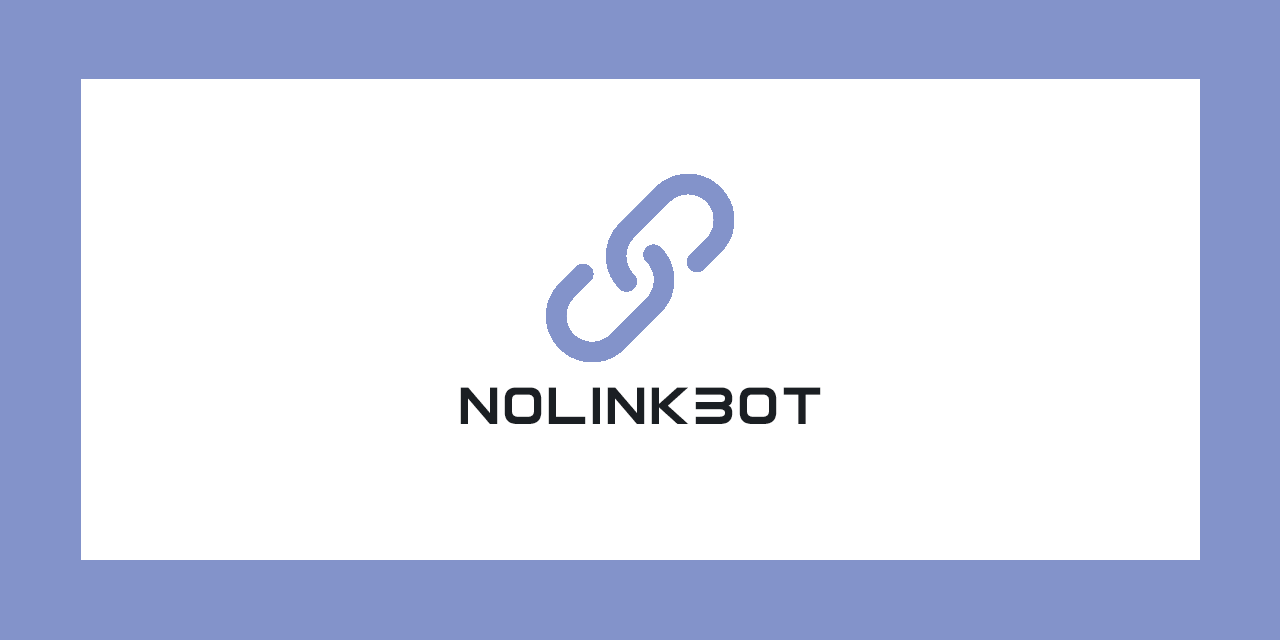
<style>
.page{position:relative;width:1280px;height:640px;background:#ffffff}
.page>*{position:absolute;margin:0}
.t1{font:50px "ElementalEnd";color:#1b1f23}
</style>
<div class="page">
<p class="t1" style="left:460px;top:387px;width:361px;height:37px">NoLinkBot</p>
</div>
